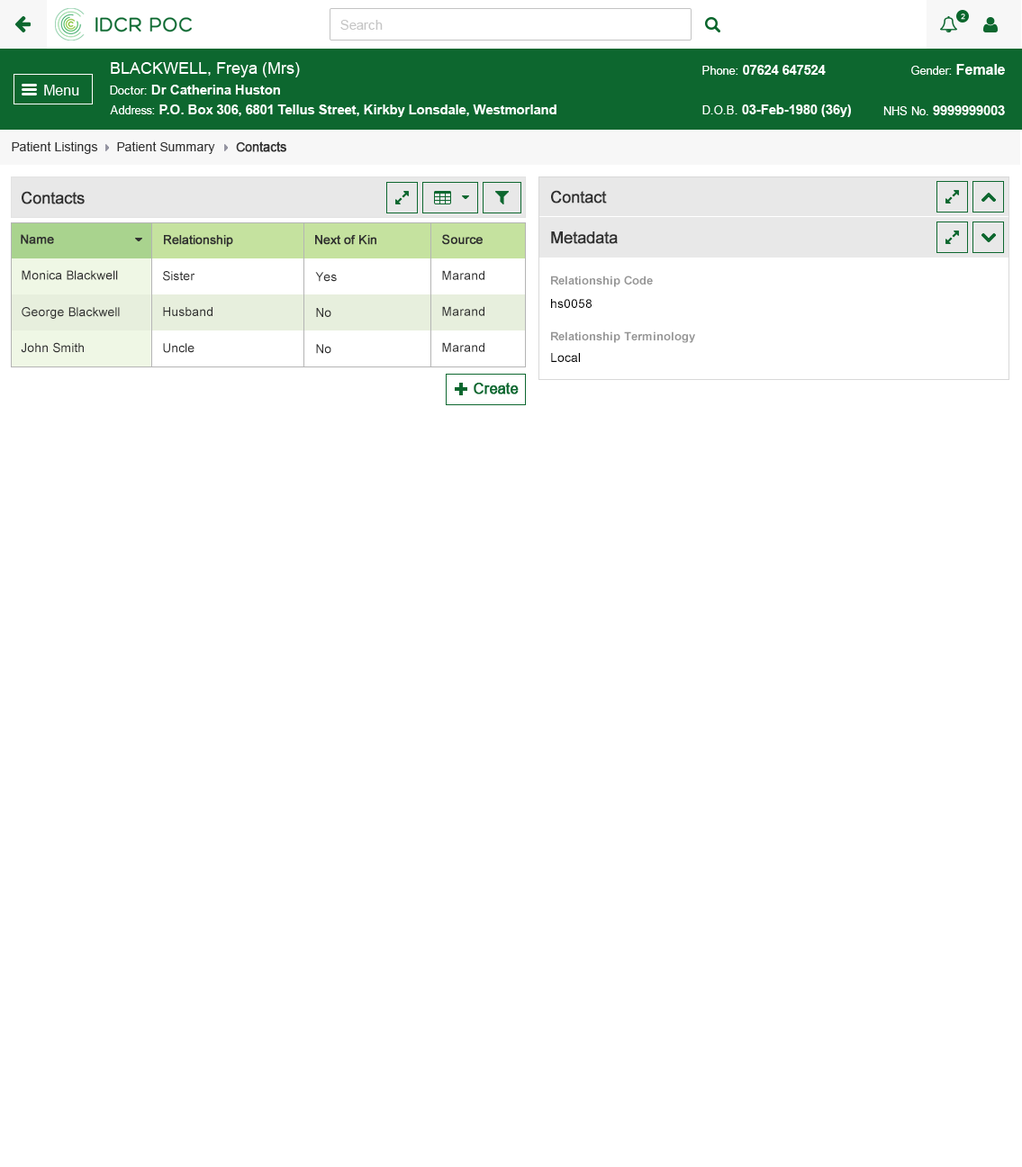
<style>
.page{position:relative;width:1022px;height:1167px;background:#ffffff}
.page>*{position:absolute;margin:0}
.t1{font:12.6px "ArialMT";color:#313131}
.t2{font:12.6px "ArialMT";color:#313131;font-weight:bold}
.t3{font:16.2px "ArialMT";color:#303030;font-weight:bold}
.t4{font:12.6px "ArialMT";color:#303030;font-weight:bold}
.t5{font:12.6px "ArialMT";color:#303030}
.t6{font:11.7px "Arial-BoldMT";color:#959595}
.t7{font:12.6px "ArialMT";color:#000000}
</style>
<div class="page">
<p class="t1" style="left:12px;top:141px;width:86px;height:13px">Patient Listings</p>
<p class="t1" style="left:117px;top:141px;width:98px;height:13px">Patient Summary</p>
<p class="t2" style="left:236px;top:141px;width:50px;height:11px">Contacts</p>
<p class="t3" style="left:22px;top:191px;width:63px;height:13px">Contacts</p>
<p class="t3" style="left:551px;top:190px;width:56px;height:13px">Contact</p>
<p class="t3" style="left:551px;top:231px;width:67px;height:13px">Metadata</p>
<p class="t4" style="left:21px;top:234px;width:33px;height:10px">Name</p>
<p class="t4" style="left:164px;top:235px;width:69px;height:12px">Relationship</p>
<p class="t4" style="left:315px;top:235px;width:61px;height:10px">Next of Kin</p>
<p class="t4" style="left:442px;top:234px;width:41px;height:11px">Source</p>
<p class="t5" style="left:22px;top:270px;width:96px;height:10px">Monica Blackwell</p>
<p class="t5" style="left:163px;top:271px;width:32px;height:10px">Sister</p>
<p class="t5" style="left:315px;top:272px;width:22px;height:10px">Yes</p>
<p class="t5" style="left:442px;top:270px;width:42px;height:10px">Marand</p>
<p class="t6" style="left:551px;top:276px;width:102px;height:11px">Relationship Code</p>
<p class="t7" style="left:551px;top:299px;width:41px;height:9px">hs0058</p>
<p class="t5" style="left:22px;top:307px;width:98px;height:12px">George Blackwell</p>
<p class="t5" style="left:163px;top:307px;width:49px;height:9px">Husband</p>
<p class="t5" style="left:316px;top:308px;width:15px;height:9px">No</p>
<p class="t5" style="left:442px;top:306px;width:42px;height:10px">Marand</p>
<p class="t6" style="left:551px;top:331px;width:144px;height:12px">Relationship Terminology</p>
<p class="t5" style="left:21px;top:342px;width:63px;height:11px">John Smith</p>
<p class="t5" style="left:163px;top:343px;width:31px;height:10px">Uncle</p>
<p class="t5" style="left:316px;top:344px;width:15px;height:10px">No</p>
<p class="t5" style="left:442px;top:342px;width:42px;height:10px">Marand</p>
<p class="t7" style="left:551px;top:353px;width:29px;height:9px">Local</p>
</div>
